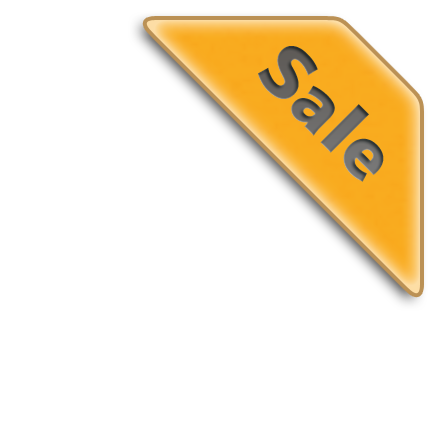
<style>
.page{position:relative;width:440px;height:440px;background:#ffffff}
.page>*{position:absolute;margin:0}
.t1{font:72px "mplus-1p-black";color:#666462}
</style>
<div class="page">
<p class="t1" style="left:258px;top:46px;width:126px;height:136px;rotate:45deg">Sale</p>
</div>
